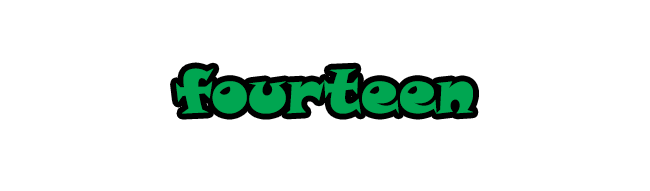
<style>
.page{position:relative;width:650px;height:191px;background:#ffffff}
.page>*{position:absolute;margin:0}
.t1{font:60px "SnapITC-Regular";color:#00a651}
</style>
<div class="page">
<p class="t1" style="left:176px;top:68px;width:297px;height:46px">fourteen</p>
</div>
